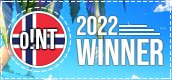
<style>
.page{position:relative;width:172px;height:80px}
.page>*{position:absolute;margin:0}
.t1{font:26.7px "BebasNeue-Regular";color:#ffffff}
.t2{font:28.5px "BebasNeue-Regular";color:#ffffff}
.t3{font:23.7px "BebasNeue-Regular";color:#ffffff}
.t4{font:37.3px "BebasNeue-Regular";color:#ffffff}
</style>
<div class="page">
<p class="t1" style="left:77px;top:16px;width:41px;height:19px">2022</p>
<p class="t2" style="left:20px;top:29px;width:38px;height:20px"><span class="t3">o</span>!nt</p>
<p class="t4" style="left:76px;top:39px;width:88px;height:26px">winner</p>
</div>
